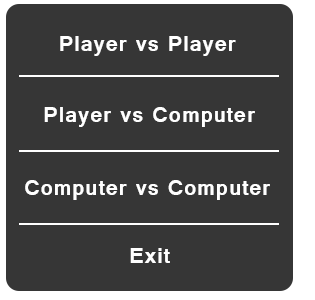
<style>
.page{position:relative;width:315px;height:300px;background:#363636}
.page>*{position:absolute;margin:0}
.t1{font:24px "Vrinda-Bold";letter-spacing:0.025em;color:#ffffff}
</style>
<div class="page">
<p class="t1" style="left:60px;top:36px;width:176px;height:20px">Player vs Player</p>
<p class="t1" style="left:44px;top:107px;width:211px;height:20px">Player vs Computer</p>
<p class="t1" style="left:25px;top:180px;width:245px;height:20px">Computer vs Computer</p>
<p class="t1" style="left:130px;top:248px;width:40px;height:15px">Exit</p>
</div>
